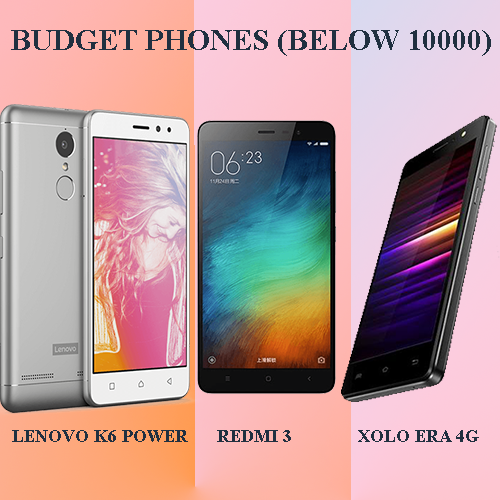
<style>
.page{position:relative;width:500px;height:500px}
.page>*{position:absolute;margin:0}
.t1{font:30px "TimesNewRomanPS-BoldMT";color:#203040}
.t2{font:18px "TimesNewRomanPS-BoldMT";color:#203040}
</style>
<div class="page">
<p class="t1" style="left:11px;top:30px;width:480px;height:26px">BUDGET PHONES (BELOW 10000)</p>
<p class="t2" style="left:12px;top:430px;width:176px;height:12px">LENOVO K6 POWER</p>
<p class="t2" style="left:217px;top:430px;width:74px;height:12px">REDMI 3</p>
<p class="t2" style="left:358px;top:430px;width:121px;height:12px">XOLO ERA 4G</p>
</div>
